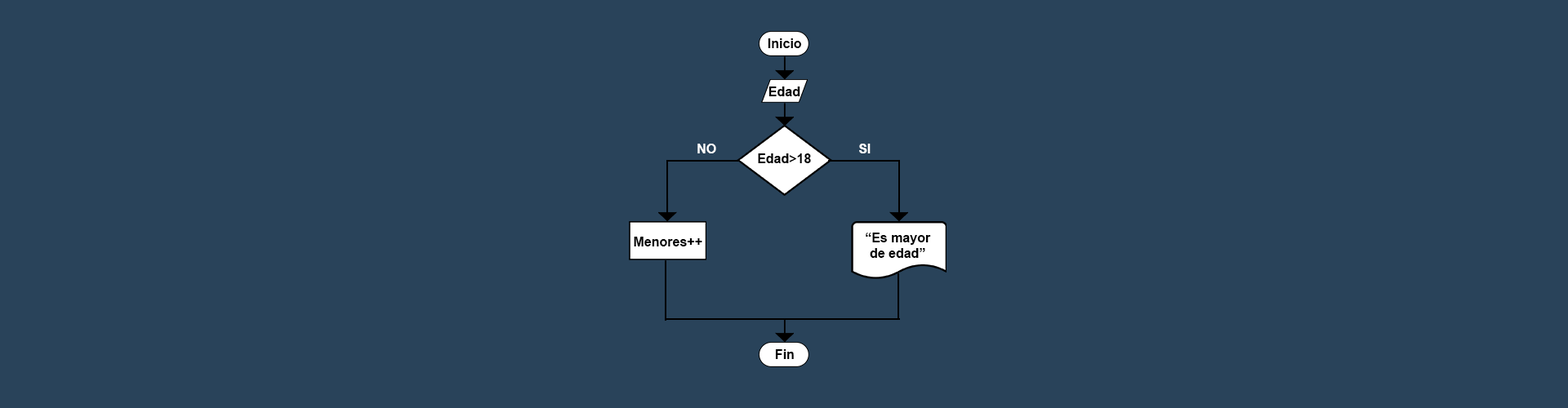
<style>
.page{position:relative;width:1568px;height:408px;background:#29435a}
.page>*{position:absolute;margin:0}
.t1{font:13.1px "Arial-BoldMT";color:#000000}
.t2{font:13.1px "Arial-BoldMT";color:#ffffff}
</style>
<div class="page">
<p class="t1" style="left:768px;top:38px;width:34px;height:10px">Inicio</p>
<p class="t1" style="left:768px;top:87px;width:32px;height:9px">Edad</p>
<p class="t2" style="left:697px;top:144px;width:19px;height:10px">NO</p>
<p class="t2" style="left:859px;top:144px;width:12px;height:10px">SI</p>
<p class="t1" style="left:758px;top:154px;width:53px;height:9px">Edad&gt;18</p>
<p class="t1" style="left:866px;top:233px;width:65px;height:25px;text-align:center">“Es mayor<br>de edad”</p>
<p class="t1" style="left:634px;top:237px;width:68px;height:10px">Menores++</p>
<p class="t1" style="left:775px;top:350px;width:19px;height:9px">Fin</p>
</div>
